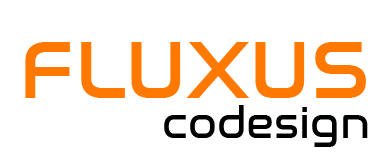
<style>
.page{position:relative;width:390px;height:156px;background:#ffffff}
.page>*{position:absolute;margin:0}
.t1{font:84px "NasalizationRg-Regular";color:#ff7800}
.t2{font:42.7px "NasalizationRg-Regular";color:#000000}
</style>
<div class="page">
<p class="t1" style="left:25px;top:42px;width:341px;height:56px">FLUXUS</p>
<p class="t2" style="left:164px;top:105px;width:204px;height:42px">codesign</p>
</div>
